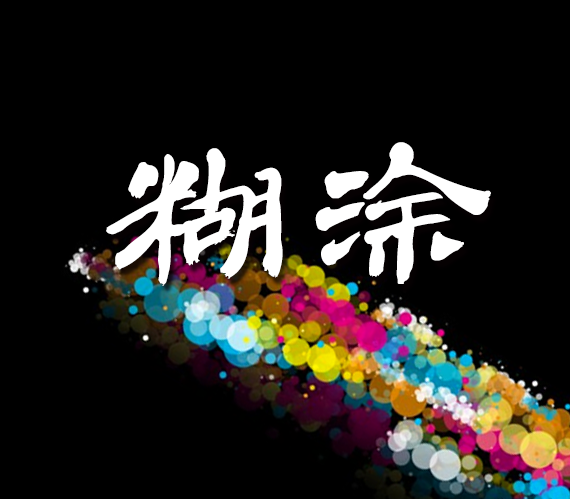
<style>
.page{position:relative;width:570px;height:499px;background:#000000}
.page>*{position:absolute;margin:0}
.t1{font:209.3px "FZHJJW--GB1-0";color:#ffffff}
</style>
<div class="page">
<p class="t1" style="left:106px;top:142px;width:385px;height:144px">糊涂</p>
</div>
